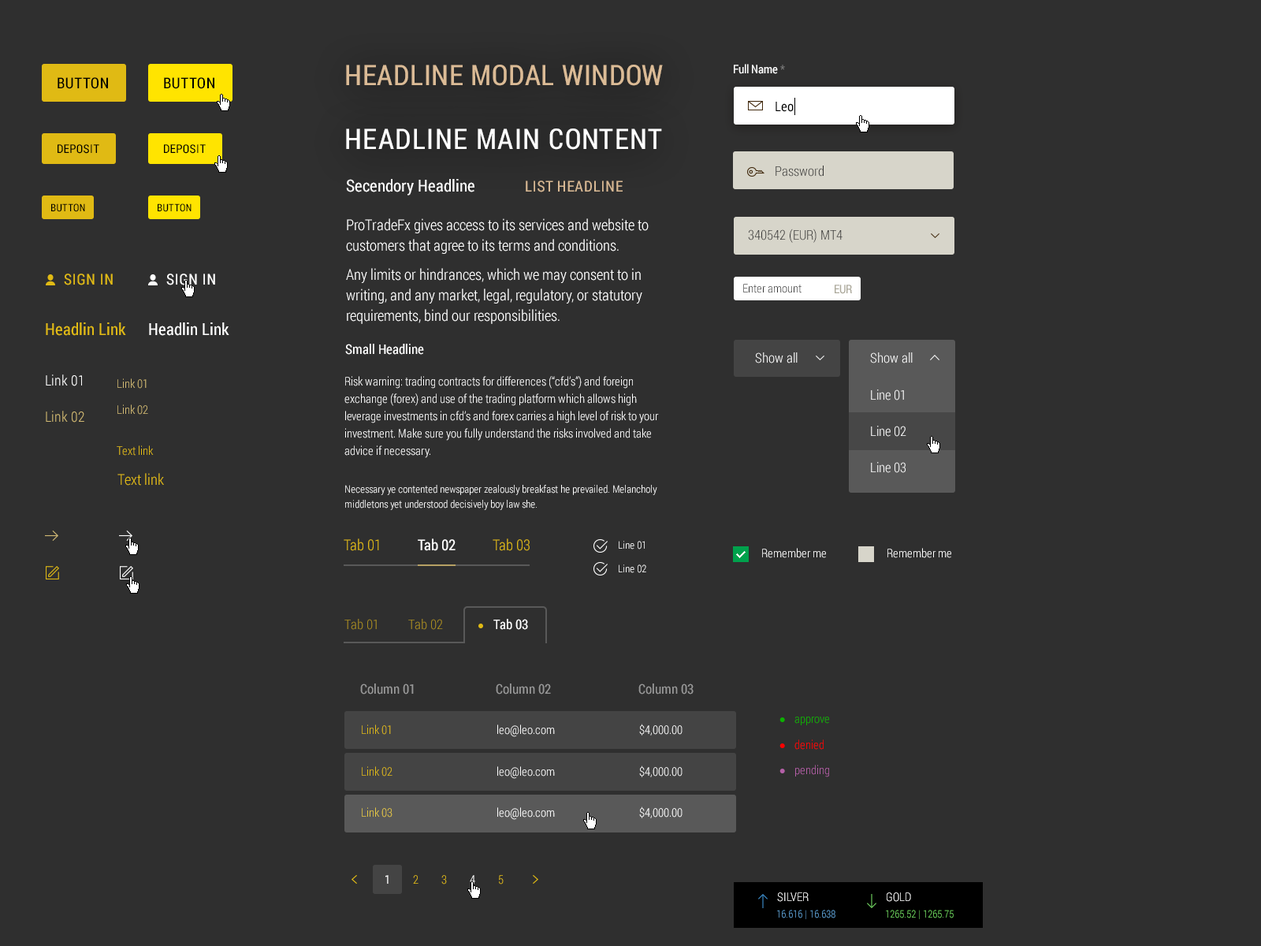
<style>
.page{position:relative;width:1261px;height:946px;background:#2f2f2f}
.page>*{position:absolute;margin:0}
.t1{font:28.4px "RobotoCondensed-Regular";letter-spacing:0.02em;color:#dbbb96;text-transform:uppercase}
.t2{font:11.8px "RobotoCondensed-Regular";color:#ffffff}
.t3{font:11.8px "RobotoCondensed-Regular";color:#7a7a7a}
.t4{font:15px "RobotoCondensed-Regular";letter-spacing:0.04em;color:#000000;text-transform:uppercase}
.t5{font:13.4px "RobotoCondensed-Regular";color:#000000}
.t6{font:28.4px "RobotoCondensed-Regular";letter-spacing:0.04em;color:#ffffff;text-transform:uppercase}
.t7{font:11.8px "RobotoCondensed-Regular";letter-spacing:0.04em;color:#000000;text-transform:uppercase}
.t8{font:13.4px "RobotoCondensed-Light";color:#333333}
.t9{font:16.5px "RobotoCondensed-Regular";color:#ffffff}
.t10{font:15px "RobotoCondensed-Regular";letter-spacing:0.04em;color:#dbbb96;text-transform:uppercase}
.t11{font:10.2px "RobotoCondensed-Regular";letter-spacing:0.04em;color:#000000;text-transform:uppercase}
.t12{font:15px/20.5px "RobotoCondensed-Light";color:#ffffff}
.t13{font:15px "RobotoCondensed-Regular";letter-spacing:0.04em;color:#e0ba14;text-transform:uppercase}
.t14{font:15px "RobotoCondensed-Regular";letter-spacing:0.04em;color:#ffffff;text-transform:uppercase}
.t15{font:11.8px "RobotoCondensed-Light";color:#333333}
.t16{font:11.8px "RobotoCondensed-Regular";color:#aca99b}
.t17{font:16.5px "RobotoCondensed-Regular";color:#e0ba14}
.t18{font:13.4px "RobotoCondensed-Regular";color:#ffffff}
.t19{font:13.4px "RobotoCondensed-Light";color:#ffffff}
.t20{font:14.2px "RobotoCondensed-Light";color:#ffffff}
.t21{font:11.8px/17.3px "RobotoCondensed-Light";color:#ffffff}
.t22{font:11.8px/17.3px "RobotoCondensed-Light";color:#d2ba74}
.t23{font:13.4px/27.6px "RobotoCondensed-Light";color:#ffffff}
.t24{font:14.2px "RobotoCondensed-Light";color:#d2ba74}
.t25{font:11.8px "RobotoCondensed-Light";color:#e0ba14}
.t26{font:15px "RobotoCondensed-Light";color:#e0ba14}
.t27{font:10.2px/15px "RobotoCondensed-Light";color:#ffffff}
.t28{font:15px "RobotoCondensed-Regular";color:#ffffff}
.t29{font:11.8px "RobotoCondensed-Light";color:#ffffff}
.t30{font:13.4px "RobotoCondensed-Light";color:#a88d20}
.t31{font:13.4px "RobotoCondensed-Regular";color:#989898}
.t32{font:11.8px "RobotoCondensed-Light";color:#0db100}
.t33{font:11.8px "RobotoCondensed-Light";color:#ff0000}
.t34{font:11.8px "RobotoCondensed-Light";color:#b560a8}
.t35{font:11.8px "RobotoCondensed-Light";color:#e6c843}
.t36{font:11.8px "RobotoCondensed-Light"}
.t37{font:10.2px "RobotoCondensed-Light";color:#62a4d7}
.t38{font:10.2px "RobotoCondensed-Light";color:#72d762}
</style>
<div class="page">
<p class="t1" style="left:346px;top:65px;width:317px;height:21px">Headline modal window</p>
<p class="t2" style="left:734px;top:64px;width:51px;height:10px">Full Name <span class="t3">*</span></p>
<p class="t4" style="left:58px;top:77px;width:50px;height:12px">Button</p>
<p class="t4" style="left:164px;top:77px;width:50px;height:12px">Button</p>
<p class="t5" style="left:775px;top:102px;width:19px;height:10px">Leo</p>
<p class="t6" style="left:346px;top:128px;width:316px;height:22px">Headline main content</p>
<p class="t7" style="left:58px;top:144px;width:41px;height:10px">Deposit</p>
<p class="t7" style="left:164px;top:144px;width:42px;height:10px">Deposit</p>
<p class="t8" style="left:775px;top:165px;width:49px;height:12px">Password</p>
<p class="t9" style="left:346px;top:179px;width:128px;height:16px">Secendory Headline</p>
<p class="t10" style="left:526px;top:180px;width:97px;height:12px">List headline</p>
<p class="t11" style="left:51px;top:203px;width:34px;height:9px">Button</p>
<p class="t11" style="left:158px;top:203px;width:34px;height:9px">Button</p>
<p class="t12" style="left:346px;top:218px;width:303px;height:106px">ProTradeFx gives access to its services and website to customers that agree to its terms and conditions.<br>Any limits or hindrances, which we may consent to in writing, and any market, legal, regulatory, or statutory requirements, bind our responsibilities.</p>
<p class="t8" style="left:748px;top:229px;width:94px;height:14px">340542 (EUR) MT4</p>
<p class="t13" style="left:64px;top:273px;width:49px;height:12px">Sign in</p>
<p class="t14" style="left:166px;top:273px;width:49px;height:12px">Sign in</p>
<p class="t15" style="left:743px;top:284px;width:58px;height:9px">Enter amount</p>
<p class="t16" style="left:835px;top:284px;width:17px;height:10px">EUR</p>
<p class="t17" style="left:46px;top:322px;width:80px;height:14px">Headlin Link</p>
<p class="t9" style="left:149px;top:322px;width:80px;height:14px">Headlin Link</p>
<p class="t18" style="left:345px;top:344px;width:79px;height:11px">Small Headline</p>
<p class="t19" style="left:755px;top:352px;width:43px;height:11px">Show all</p>
<p class="t19" style="left:870px;top:352px;width:43px;height:11px">Show all</p>
<p class="t20" style="left:46px;top:374px;width:36px;height:12px">Link 01</p>
<p class="t21" style="left:344px;top:376px;width:315px;height:82px">Risk warning: trading contracts for differences (“cfd’s”) and foreign exchange (forex) and use of the trading platform which allows high leverage investments in cfd’s and forex carries a high level of risk to your investment. Make sure you fully understand the risks involved and take advice if necessary.</p>
<p class="t22" style="left:117px;top:378px;width:31px;height:37px">Link 01<br>Link 02</p>
<p class="t23" style="left:871px;top:389px;width:35px;height:84px">Line 01<br>Line 02<br>Line 03</p>
<p class="t24" style="left:46px;top:411px;width:38px;height:11px">Link 02</p>
<p class="t25" style="left:117px;top:445px;width:37px;height:11px">Text link</p>
<p class="t26" style="left:117px;top:473px;width:47px;height:12px">Text link</p>
<p class="t27" style="left:345px;top:485px;width:312px;height:25px">Necessary ye contented newspaper zealously breakfast he prevailed. Melancholy middletons yet understood decisively boy law she.</p>
<p class="t26" style="left:344px;top:538px;width:35px;height:13px">Tab 01</p>
<p class="t28" style="left:418px;top:538px;width:38px;height:13px">Tab 02</p>
<p class="t26" style="left:493px;top:538px;width:37px;height:13px">Tab 03</p>
<p class="t27" style="left:619px;top:541px;width:27px;height:32px">Line 01<br>Line 02</p>
<p class="t29" style="left:762px;top:548px;width:64px;height:10px">Remember me</p>
<p class="t29" style="left:887px;top:548px;width:64px;height:10px">Remember me</p>
<p class="t30" style="left:344px;top:619px;width:33px;height:11px">Tab 01</p>
<p class="t30" style="left:408px;top:619px;width:35px;height:11px">Tab 02</p>
<p class="t18" style="left:493px;top:619px;width:35px;height:11px">Tab 03</p>
<p class="t31" style="left:360px;top:683px;width:54px;height:11px">Column 01</p>
<p class="t31" style="left:496px;top:683px;width:55px;height:11px">Column 02</p>
<p class="t31" style="left:638px;top:683px;width:56px;height:11px">Column 03</p>
<p class="t25" style="left:362px;top:724px;width:29px;height:10px">Link 01</p>
<p class="t29" style="left:497px;top:724px;width:58px;height:13px">leo@leo.com</p>
<p class="t29" style="left:639px;top:723px;width:43px;height:12px">$4,000.00</p>
<p class="t32" style="left:794px;top:716px;width:35px;height:9px">approve</p>
<p class="t33" style="left:794px;top:739px;width:30px;height:10px">denied</p>
<p class="t25" style="left:362px;top:766px;width:30px;height:10px">Link 02</p>
<p class="t29" style="left:497px;top:766px;width:58px;height:13px">leo@leo.com</p>
<p class="t29" style="left:639px;top:765px;width:43px;height:12px">$4,000.00</p>
<p class="t34" style="left:795px;top:764px;width:34px;height:13px">pending</p>
<p class="t35" style="left:362px;top:807px;width:30px;height:10px">Link 03</p>
<p class="t29" style="left:497px;top:807px;width:58px;height:13px">leo@leo.com</p>
<p class="t29" style="left:639px;top:806px;width:43px;height:12px">$4,000.00</p>
<p class="t25" style="left:385px;top:875px;width:119px;height:9px"><span class="t2">1</span> 2 3 <span class="t29">4</span> 5</p>
<p class="t36" style="left:777px;top:892px;width:32px;height:10px">SILVER</p>
<p class="t29" style="left:887px;top:892px;width:24px;height:10px">GOLD</p>
<p class="t37" style="left:777px;top:909px;width:58px;height:10px">16.616 | 16.638</p>
<p class="t38" style="left:886px;top:909px;width:68px;height:10px">1265.52 | 1265.75</p>
</div>
